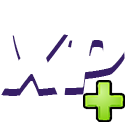
<style>
.page{position:relative;width:128px;height:128px;background:#ffffff}
.page>*{position:absolute;margin:0}
.t1{font:64.6px "Supercell-Magic";letter-spacing:-0.025em;color:#ffffff}
</style>
<div class="page">
<p class="t1" style="left:1px;top:26px;width:124px;height:63px">XP</p>
</div>
